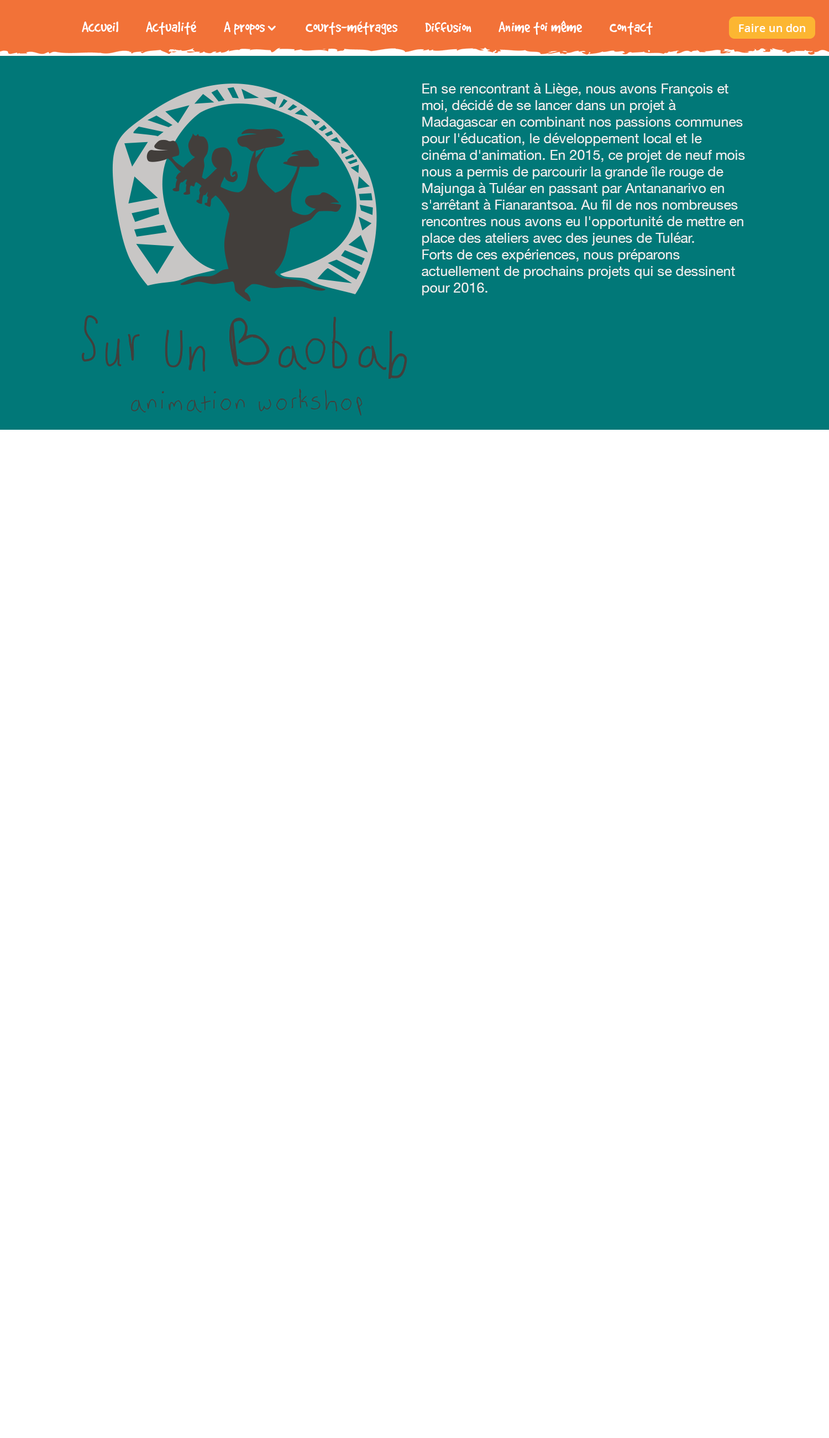
<style>
.page{position:relative;width:829px;height:1438px;background:#ffffff}
.page>*{position:absolute;margin:0}
.t1{font:16.6px "GoodDog";color:#ffffff}
.t2{font:11.1px "OpenSans-Semibold";color:#ffffff}
.t3{font:13.8px "HelveticaNeue";color:#efefef}
</style>
<div class="page">
<p class="t1" style="left:82px;top:21px;width:36px;height:11px">Accueil</p>
<p class="t1" style="left:146px;top:21px;width:50px;height:14px">Actualité</p>
<p class="t1" style="left:306px;top:21px;width:92px;height:14px">Courts-métrages</p>
<p class="t1" style="left:425px;top:22px;width:47px;height:11px">Diffusion</p>
<p class="t1" style="left:499px;top:20px;width:83px;height:15px">Anime toi même</p>
<p class="t1" style="left:610px;top:22px;width:43px;height:13px">Contact</p>
<p class="t2" style="left:739px;top:24px;width:67px;height:8px">Faire un don</p>
<p class="t3" style="left:422px;top:83px;width:323px;height:212px">En se rencontrant à Liège, nous avons François et moi, décidé de se lancer dans un projet à Madagascar en combinant nos passions communes pour l'éducation, le développement local et le cinéma d'animation. En 2015, ce projet de neuf mois nous a permis de parcourir la grande île rouge de Majunga à Tuléar en passant par Antananarivo en s'arrêtant à Fianarantsoa. Au fil de nos nombreuses rencontres nous avons eu l'opportunité de mettre en place des ateliers avec des jeunes de Tuléar.<br>Forts de ces expériences, nous préparons actuellement de prochains projets qui se dessinent pour 2016.</p>
</div>
